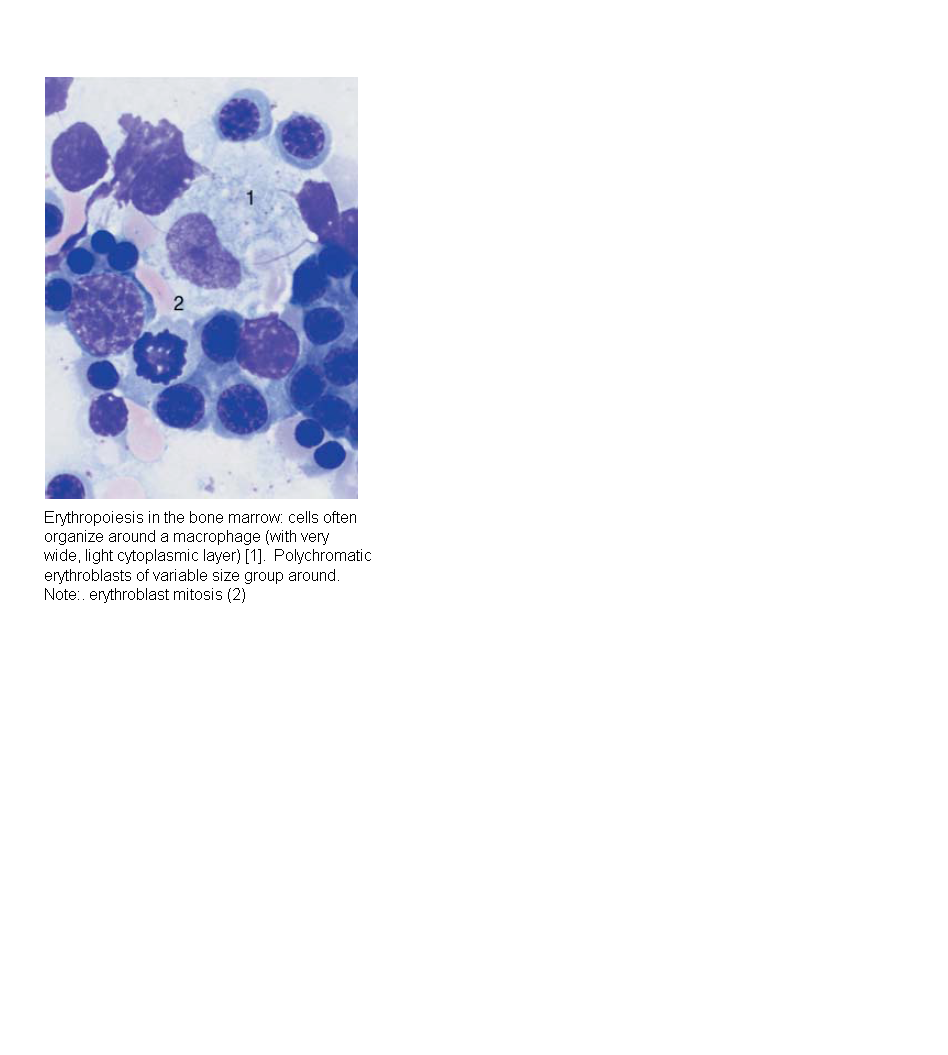
<style>
.page{position:relative;width:948px;height:1055px;background:#ffffff}
.page>*{position:absolute;margin:0}
.t1{font:16px "ArialMT";color:#000000}
</style>
<div class="page">
<p class="t1" style="left:44px;top:511px;width:327px;height:92px">Erythropoiesis in the bone marrow: cells often<br>organize around a macrophage (with very <br>wide, light cytoplasmic layer) [1].  Polychromatic<br>erythroblasts of variable size group around.<br>Note:. erythroblast mitosis (2)</p>
</div>
